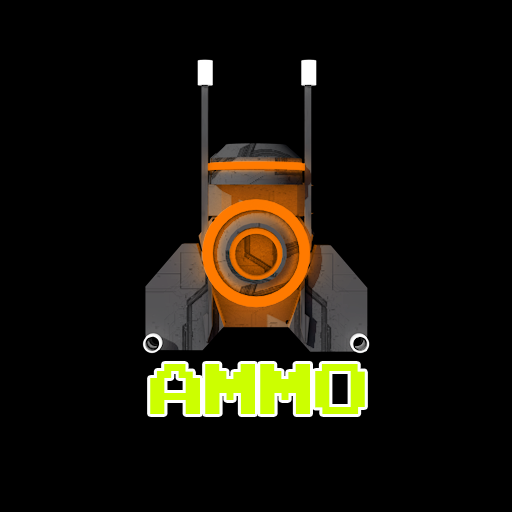
<style>
.page{position:relative;width:512px;height:512px;background:#000000}
.page>*{position:absolute;margin:0}
.t1{font:100px "ArcadeClassic";color:#ccff00}
</style>
<div class="page">
<p class="t1" style="left:150px;top:364px;width:215px;height:50px">Ammo</p>
</div>
